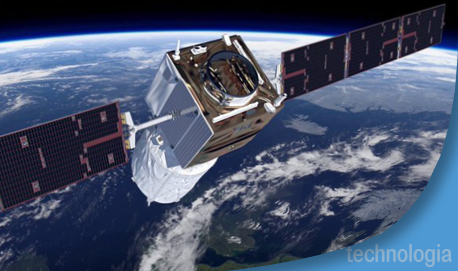
<style>
.page{position:relative;width:458px;height:271px}
.page>*{position:absolute;margin:0}
.t1{font:25.1px "ArialRoundedMTBold";color:#8eb4d2;scale:0.74 1}
</style>
<div class="page">
<p class="t1" style="left:346px;top:244px;width:106px;height:23px">technologia</p>
</div>
